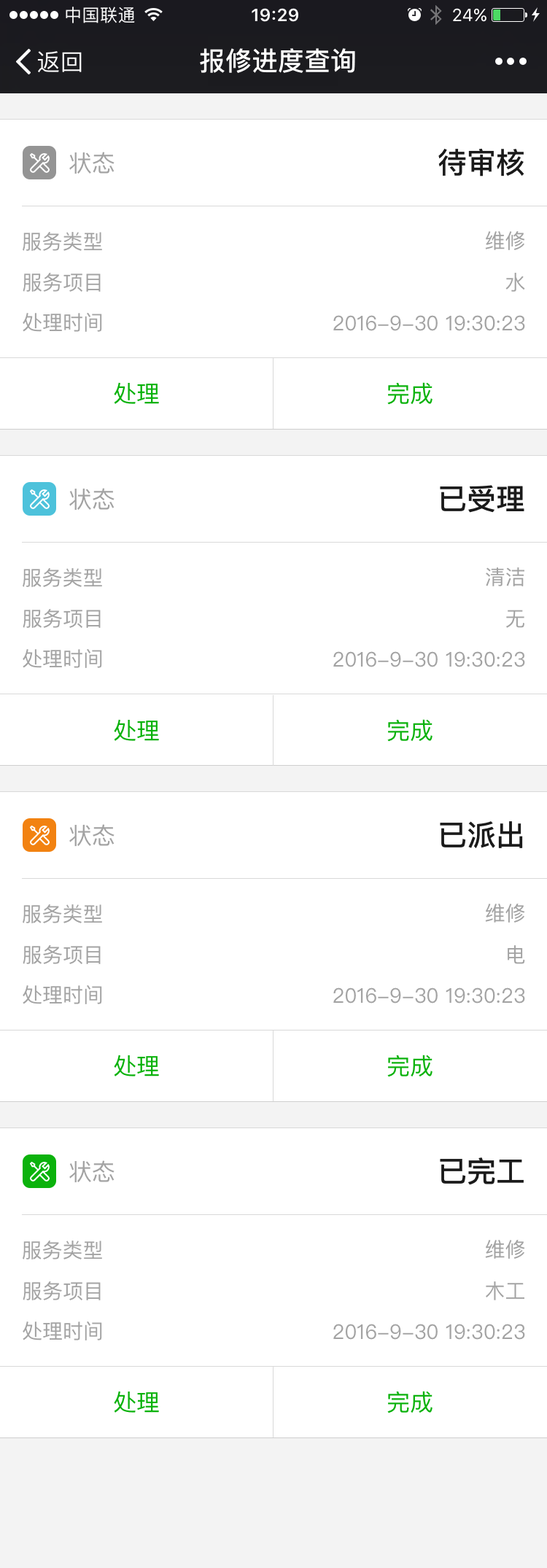
<style>
.page{position:relative;width:547px;height:1568px;background:#ffffff}
.page>*{position:absolute;margin:0}
.t1{font:26.3px "PingFangSC-Medium";color:#ffffff}
.t2{font:29.2px "PingFangSC-Medium";color:#1a1a1a}
.t3{font:23.3px "PingFangSC-Regular";color:#a3a3a3}
.t4{font:20.4px "PingFangSC-Regular";color:#a3a3a3}
.t5{font:23.3px "PingFangSC-Regular";color:#0bb20c}
</style>
<div class="page">
<p class="t1" style="left:200px;top:48px;width:155px;height:25px">报修进度查询</p>
<p class="t2" style="left:438px;top:148px;width:86px;height:28px">待审核</p>
<p class="t3" style="left:69px;top:152px;width:46px;height:22px">状态</p>
<p class="t4" style="left:23px;top:232px;width:79px;height:19px">服务类型</p>
<p class="t4" style="left:485px;top:231px;width:40px;height:19px">维修</p>
<p class="t4" style="left:23px;top:273px;width:78px;height:19px">服务项目</p>
<p class="t4" style="left:505px;top:273px;width:20px;height:19px">水</p>
<p class="t4" style="left:23px;top:313px;width:79px;height:19px">处理时间</p>
<p class="t4" style="left:333px;top:315px;width:192px;height:16px">2016-9-30 19:30:23</p>
<p class="t5" style="left:114px;top:382px;width:45px;height:22px">处理</p>
<p class="t5" style="left:387px;top:382px;width:45px;height:23px">完成</p>
<p class="t2" style="left:440px;top:485px;width:84px;height:28px">已受理</p>
<p class="t3" style="left:69px;top:488px;width:46px;height:23px">状态</p>
<p class="t4" style="left:23px;top:568px;width:79px;height:19px">服务类型</p>
<p class="t4" style="left:486px;top:567px;width:38px;height:19px">清洁</p>
<p class="t4" style="left:23px;top:609px;width:78px;height:19px">服务项目</p>
<p class="t4" style="left:506px;top:610px;width:18px;height:18px">无</p>
<p class="t4" style="left:23px;top:649px;width:79px;height:19px">处理时间</p>
<p class="t4" style="left:333px;top:651px;width:192px;height:16px">2016-9-30 19:30:23</p>
<p class="t5" style="left:114px;top:719px;width:45px;height:22px">处理</p>
<p class="t5" style="left:387px;top:719px;width:45px;height:23px">完成</p>
<p class="t2" style="left:440px;top:821px;width:83px;height:27px">已派出</p>
<p class="t3" style="left:69px;top:824px;width:46px;height:23px">状态</p>
<p class="t4" style="left:23px;top:904px;width:79px;height:19px">服务类型</p>
<p class="t4" style="left:485px;top:904px;width:40px;height:19px">维修</p>
<p class="t4" style="left:23px;top:945px;width:78px;height:19px">服务项目</p>
<p class="t4" style="left:508px;top:945px;width:17px;height:19px">电</p>
<p class="t4" style="left:23px;top:985px;width:79px;height:19px">处理时间</p>
<p class="t4" style="left:333px;top:987px;width:192px;height:17px">2016-9-30 19:30:23</p>
<p class="t5" style="left:114px;top:1055px;width:45px;height:21px">处理</p>
<p class="t5" style="left:387px;top:1055px;width:45px;height:22px">完成</p>
<p class="t2" style="left:440px;top:1157px;width:84px;height:28px">已完工</p>
<p class="t3" style="left:69px;top:1160px;width:46px;height:23px">状态</p>
<p class="t4" style="left:23px;top:1241px;width:79px;height:19px">服务类型</p>
<p class="t4" style="left:485px;top:1240px;width:40px;height:19px">维修</p>
<p class="t4" style="left:23px;top:1281px;width:78px;height:19px">服务项目</p>
<p class="t4" style="left:486px;top:1281px;width:38px;height:19px">木工</p>
<p class="t4" style="left:23px;top:1321px;width:79px;height:19px">处理时间</p>
<p class="t4" style="left:333px;top:1324px;width:192px;height:16px">2016-9-30 19:30:23</p>
<p class="t5" style="left:114px;top:1391px;width:45px;height:22px">处理</p>
<p class="t5" style="left:387px;top:1391px;width:45px;height:22px">完成</p>
</div>
